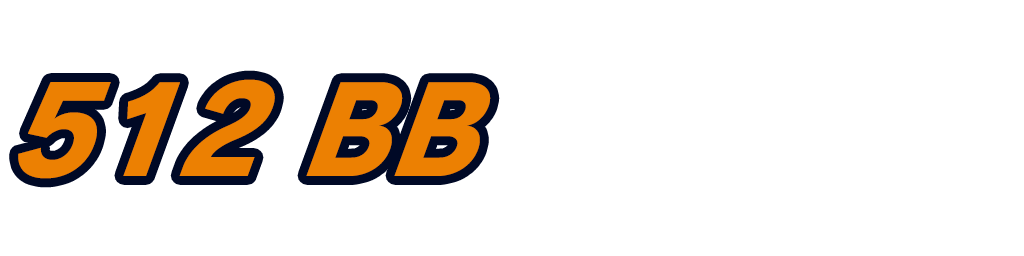
<style>
.page{position:relative;width:1024px;height:256px;background:#ffffff}
.page>*{position:absolute;margin:0}
.t1{font:128px "RodinPro-EB";letter-spacing:0.001em;color:#ec8002;scale:0.94 1}
</style>
<div class="page">
<p class="t1" style="left:18px;top:79px;width:473px;height:100px">512 BB</p>
</div>
